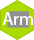
<style>
.page{position:relative;width:34px;height:40px;background:#acdb00}
.page>*{position:absolute;margin:0}
.t1{font:18px "MyriadPro-Regular";color:#ffffff}
</style>
<div class="page">
<p class="t1" style="left:2px;top:12px;width:31px;height:13px">Arm</p>
</div>
